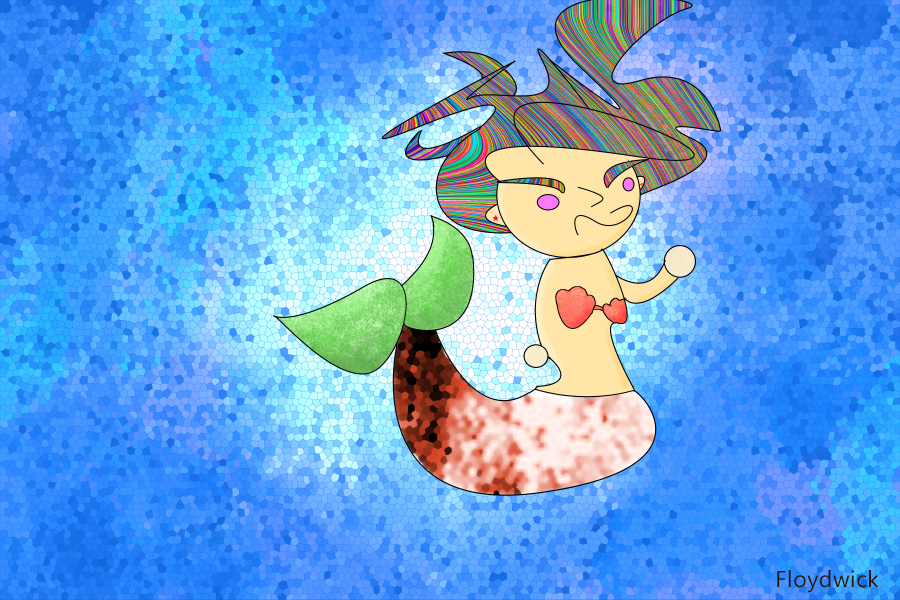
<style>
.page{position:relative;width:900px;height:600px}
.page>*{position:absolute;margin:0}
.t1{font:22.9px "MicrosoftPhagsPa";letter-spacing:0.025em;color:#2f1404}
</style>
<div class="page">
<p class="t1" style="left:777px;top:570px;width:102px;height:23px">Floydwick</p>
</div>
